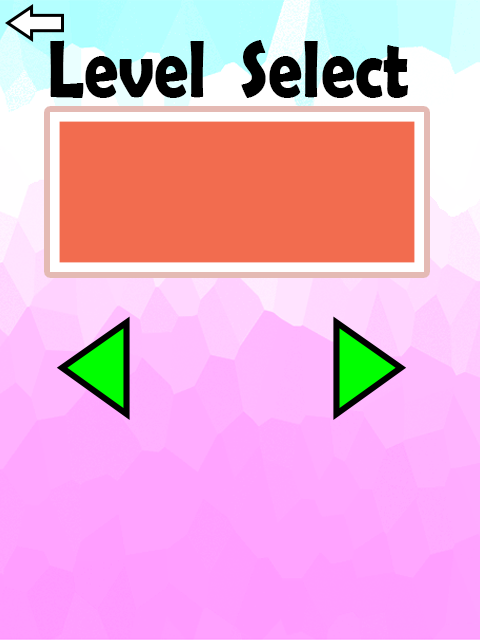
<style>
.page{position:relative;width:480px;height:640px}
.page>*{position:absolute;margin:0}
.t1{font:82px "BerlinSansFBDemi-Bold";color:#000000;scale:0.83 1}
</style>
<div class="page">
<p class="t1" style="left:50px;top:40px;width:358px;height:58px">Level  Select</p>
</div>
